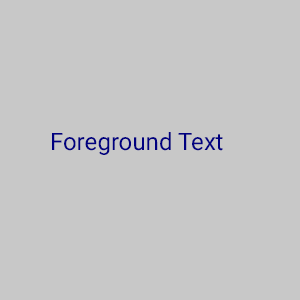
<style>
.page{position:relative;width:300px;height:300px;background:#c8c8c8}
.page>*{position:absolute;margin:0}
.t1{font:24px "Roboto-Regular";color:#000080}
</style>
<div class="page">
<p class="t1" style="left:52px;top:132px;width:171px;height:23px">Foreground Text</p>
</div>
